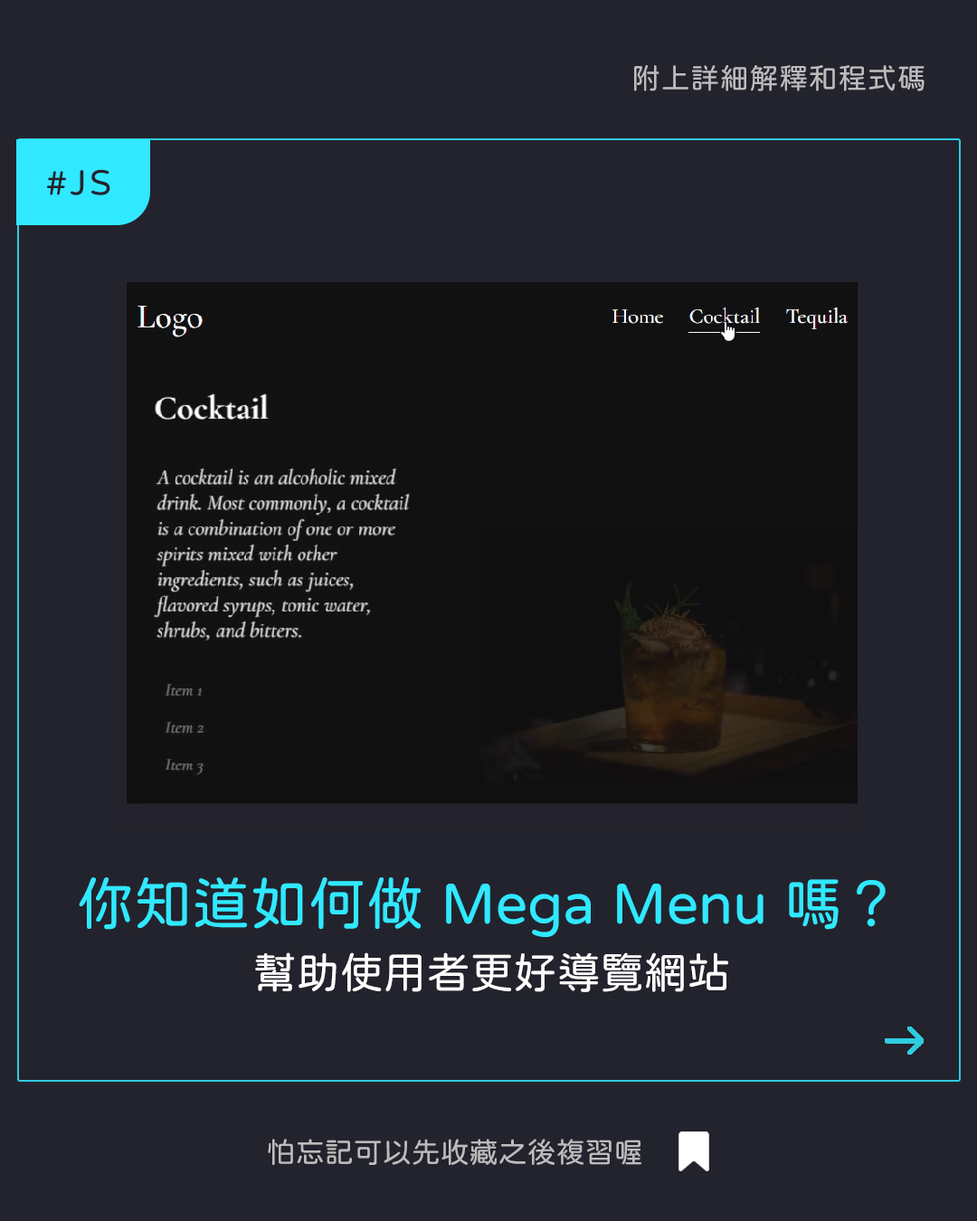
<style>
.page{position:relative;width:977px;height:1221px;background:#23232d}
.page>*{position:absolute;margin:0}
.t1{font:28.9px "jf-openhuninn-1.1";letter-spacing:0.02em;color:#bcbcbd}
.t2{font:36.2px "jf-openhuninn-1.1";letter-spacing:0.08em;color:#24232d}
.t3{font:57.9px "jf-openhuninn-1.1";color:#30e8ff}
.t4{font:43.4px "jf-openhuninn-1.1";color:#fefefe}
.t5{font:28.9px "jf-openhuninn-1.1";color:#bcbcbd}
</style>
<div class="page">
<p class="t1" style="left:634px;top:65px;width:290px;height:26px">附上詳細解釋和程式碼</p>
<p class="t2" style="left:46px;top:169px;width:64px;height:26px">#JS</p>
<p class="t3" style="left:79px;top:877px;width:806px;height:60px">你知道如何做 Mega Menu 嗎？</p>
<p class="t4" style="left:255px;top:952px;width:473px;height:40px">幫助使用者更好導覽網站</p>
<p class="t5" style="left:268px;top:1139px;width:373px;height:26px">怕忘記可以先收藏之後複習喔</p>
</div>
